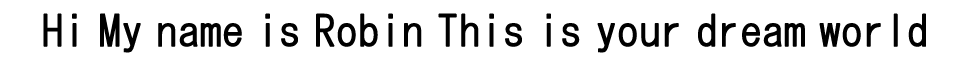
<style>
.page{position:relative;width:972px;height:69px;background:#ffffff}
.page>*{position:absolute;margin:0}
.t1{font:41.7px "HGGothicM";color:#000000;font-weight:bold}
</style>
<div class="page">
<p class="t1" style="left:43px;top:13px;width:883px;height:40px">Hi My name is Robin This is your dream world</p>
</div>
